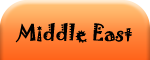
<style>
.page{position:relative;width:150px;height:60px}
.page>*{position:absolute;margin:0}
.t1{font:20px "Jokerman-Regular";color:#000000}
.t2{font:5px "Jokerman-Regular";color:#000000}
</style>
<div class="page">
<p class="t1" style="left:15px;top:22px;width:117px;height:21px"><span class="t2"><br><br></span>Middle East</p>
</div>
